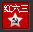
<style>
.page{position:relative;width:33px;height:32px;background:#c50000}
.page>*{position:absolute;margin:0}
.t1{font:10.4px "SimSun";letter-spacing:-0.25em;color:#ffffff}
</style>
<div class="page">
<p class="t1" style="left:4px;top:4px;width:24px;height:9px">红六三</p>
</div>
